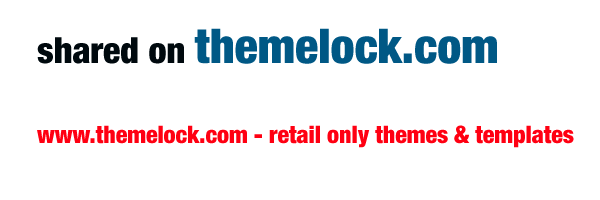
<style>
.page{position:relative;width:600px;height:200px;background:#ffffff}
.page>*{position:absolute;margin:0}
.t1{font:24px/20px "HelveticaNeue-BlackCond";color:#ff0012}
.t2{font:36px/20px "HelveticaNeue-BlackCond";color:#00090e}
.t3{font:48px/20px "HelveticaNeue-BlackCond";color:#005885}
</style>
<div class="page">
<p class="t1" style="left:37px;top:28px;width:537px;height:120px"><span class="t2">shared on </span><span class="t3">themelock.com<br><br><br><br></span>www.themelock.com - retail only themes &amp; templates</p>
</div>
